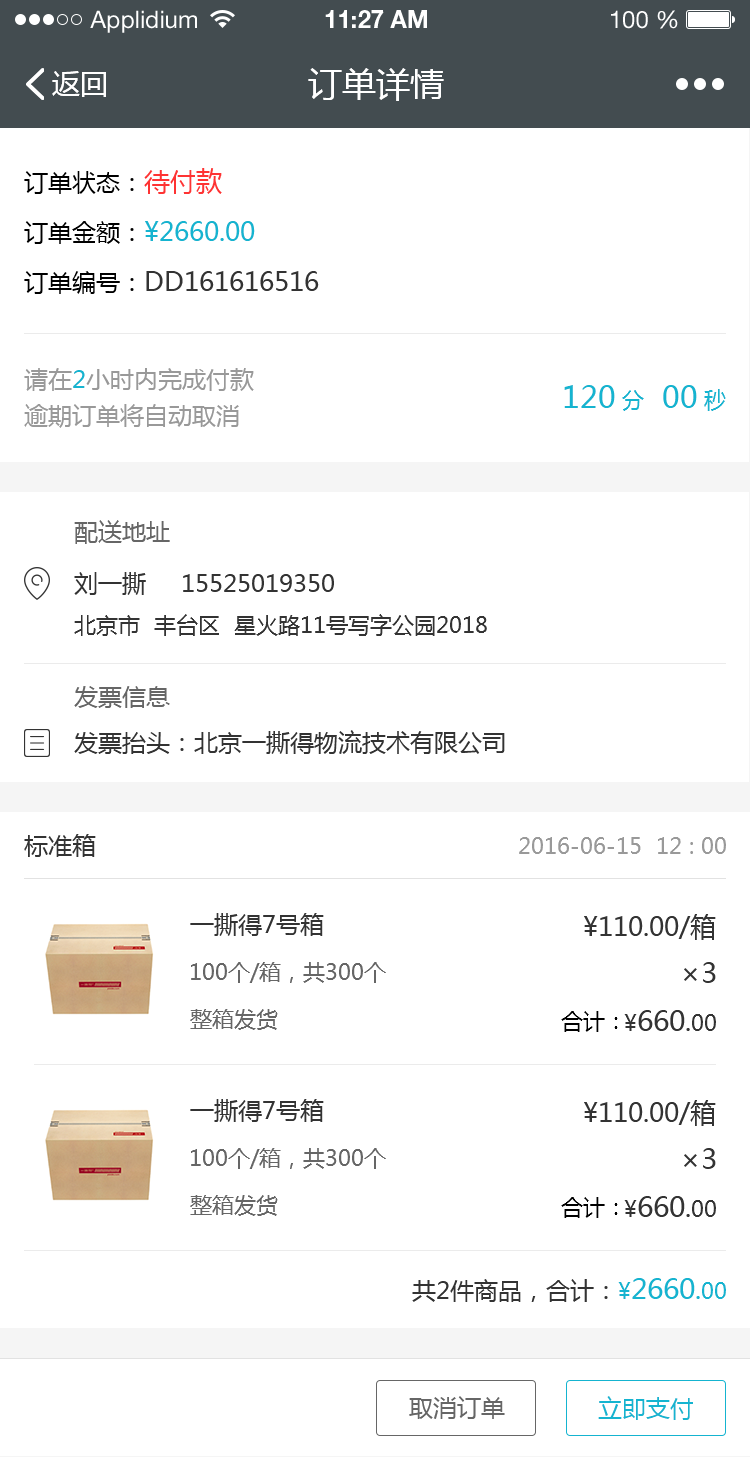
<style>
.page{position:relative;width:750px;height:1457px;background:#ffffff}
.page>*{position:absolute;margin:0}
.t1{font:24px "HelveticaNeueLTStd-Roman";color:#ffffff}
.t2{font:24px "HelveticaNeueLTStd-Bd";color:#ffffff}
.t3{font:28px "MicrosoftYaHei";color:#ffffff}
.t4{font:34px "MicrosoftYaHei";color:#ffffff}
.t5{font:26px/50px "MicrosoftYaHei";color:#333333}
.t6{font:24px/50px "MicrosoftYaHei";color:#000000}
.t7{font:26px/50px "MicrosoftYaHei";color:#fe3333}
.t8{font:26px/50px "MicrosoftYaHei";color:#15b4d0}
.t9{font:24px/36px "MicrosoftYaHei";color:#999999}
.t10{font:24px/36px "MicrosoftYaHei";color:#15b4d0}
.t11{font:30px "MicrosoftYaHei";color:#15b4d0}
.t12{font:22px "MicrosoftYaHei";color:#15b4d0}
.t13{font:24px "MicrosoftYaHei";color:#666666}
.t14{font:24px "MicrosoftYaHei";color:#333333}
.t15{font:22px "MicrosoftYaHei";color:#333333}
.t16{font:22px "MicrosoftYaHei";color:#999999}
.t17{font:26px "MicrosoftYaHei";color:#333333}
.t18{font:22px "MicrosoftYaHei";color:#666666}
.t19{font:28px "MicrosoftYaHei";color:#333333}
.t20{font:22px "MicrosoftYaHei";color:#000000}
.t21{font:28px "MicrosoftYaHei";color:#15b4d0}
.t22{font:26px "MicrosoftYaHei";color:#15b4d0}
.t23{font:24px "MicrosoftYaHei";color:#15b4d0}
</style>
<div class="page">
<p class="t1" style="left:90px;top:10px;width:107px;height:23px">Applidium</p>
<p class="t2" style="left:325px;top:10px;width:102px;height:18px">11:27 AM</p>
<p class="t1" style="left:611px;top:10px;width:67px;height:19px">100 %</p>
<p class="t3" style="left:52px;top:71px;width:54px;height:26px">返回</p>
<p class="t4" style="left:308px;top:68px;width:136px;height:33px">订单详情</p>
<p class="t5" style="left:24px;top:168px;width:295px;height:126px"><span class="t6">订单状态：</span><span class="t7">待付款<br></span><span class="t6">订单金额：</span><span class="t8">¥2660.00<br></span><span class="t6">订单编号：</span>DD161616516</p>
<p class="t9" style="left:24px;top:368px;width:230px;height:60px">请在<span class="t10">2</span>小时内完成付款<br>逾期订单将自动取消</p>
<p class="t11" style="left:564px;top:385px;width:162px;height:26px">120 <span class="t12">分</span>  00 <span class="t12">秒</span></p>
<p class="t13" style="left:74px;top:520px;width:96px;height:24px">配送地址</p>
<p class="t14" style="left:74px;top:572px;width:260px;height:23px">刘一撕     15525019350</p>
<p class="t15" style="left:74px;top:614px;width:413px;height:22px">北京市  丰台区  星火路11号写字公园2018</p>
<p class="t13" style="left:74px;top:686px;width:96px;height:22px">发票信息</p>
<p class="t14" style="left:74px;top:730px;width:431px;height:24px">发票抬头：北京一撕得物流技术有限公司</p>
<p class="t14" style="left:24px;top:834px;width:72px;height:23px">标准箱</p>
<p class="t16" style="left:519px;top:837px;width:207px;height:17px">2016-06-15  12 : 00</p>
<p class="t14" style="left:190px;top:913px;width:134px;height:23px">一撕得7号箱</p>
<p class="t17" style="left:584px;top:914px;width:132px;height:26px">¥110.00/箱</p>
<p class="t18" style="left:191px;top:962px;width:195px;height:21px">100个/箱，共300个</p>
<p class="t19" style="left:684px;top:962px;width:32px;height:21px">×3</p>
<p class="t18" style="left:190px;top:1009px;width:88px;height:21px">整箱发货</p>
<p class="t20" style="left:561px;top:1011px;width:57px;height:21px">合计：</p>
<p class="t19" style="left:624px;top:1010px;width:92px;height:21px"><span class="t15">¥</span>660<span class="t17">.</span><span class="t15">00</span></p>
<p class="t14" style="left:190px;top:1099px;width:134px;height:23px">一撕得7号箱</p>
<p class="t17" style="left:584px;top:1100px;width:132px;height:26px">¥110.00/箱</p>
<p class="t18" style="left:191px;top:1148px;width:195px;height:21px">100个/箱，共300个</p>
<p class="t19" style="left:684px;top:1148px;width:32px;height:21px">×3</p>
<p class="t18" style="left:190px;top:1195px;width:88px;height:21px">整箱发货</p>
<p class="t20" style="left:561px;top:1197px;width:57px;height:21px">合计：</p>
<p class="t19" style="left:624px;top:1196px;width:92px;height:21px"><span class="t15">¥</span>660<span class="t17">.</span><span class="t15">00</span></p>
<p class="t14" style="left:412px;top:1278px;width:314px;height:24px">共2件商品，合计：<span class="t12">¥</span><span class="t21">2660</span><span class="t22">.</span><span class="t12">00</span></p>
<p class="t13" style="left:409px;top:1396px;width:96px;height:23px">取消订单</p>
<p class="t23" style="left:598px;top:1396px;width:95px;height:24px">立即支付</p>
</div>
